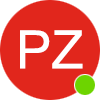
<style>
.page{position:relative;width:100px;height:100px;background:#e1261c}
.page>*{position:absolute;margin:0}
.t1{font:52.9px "ArialMT";color:#ffffff}
</style>
<div class="page">
<p class="t1" style="left:20px;top:30px;width:63px;height:39px">PZ</p>
</div>
